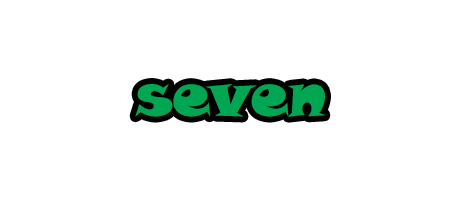
<style>
.page{position:relative;width:462px;height:199px;background:#ffffff}
.page>*{position:absolute;margin:0}
.t1{font:60px "SnapITC-Regular";color:#00a651}
</style>
<div class="page">
<p class="t1" style="left:135px;top:84px;width:190px;height:33px">seven</p>
</div>
